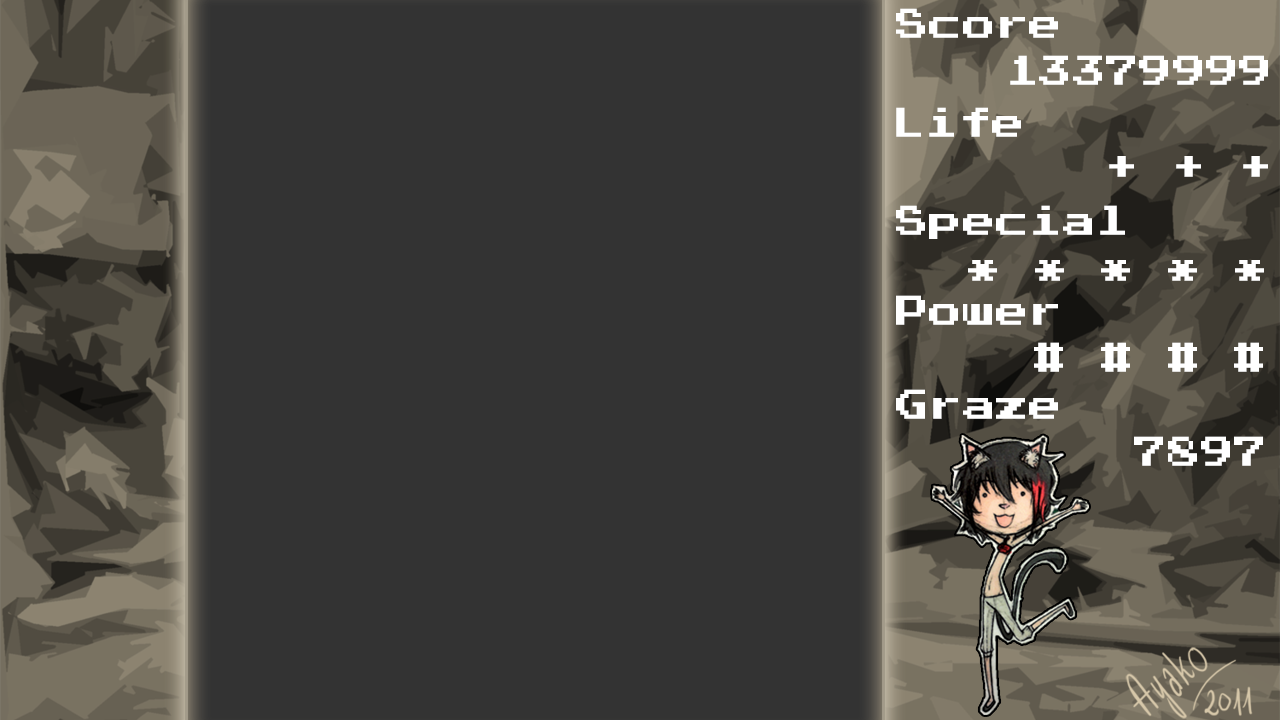
<style>
.page{position:relative;width:1280px;height:720px;background:#333333}
.page>*{position:absolute;margin:0}
.t1{font:33.3px "PressStart2P";color:#ffffff}
</style>
<div class="page">
<p class="t1" style="left:896px;top:8px;width:162px;height:30px">Score</p>
<p class="t1" style="left:1010px;top:55px;width:258px;height:30px">13379999</p>
<p class="t1" style="left:896px;top:107px;width:125px;height:30px">Life</p>
<p class="t1" style="left:1109px;top:156px;width:159px;height:21px">+ + +</p>
<p class="t1" style="left:896px;top:205px;width:229px;height:34px">Special</p>
<p class="t1" style="left:968px;top:260px;width:296px;height:21px">* * * * *</p>
<p class="t1" style="left:896px;top:295px;width:162px;height:30px">Power</p>
<p class="t1" style="left:1034px;top:342px;width:229px;height:30px"># # # #</p>
<p class="t1" style="left:896px;top:389px;width:162px;height:30px">Graze</p>
<p class="t1" style="left:1134px;top:436px;width:129px;height:30px">7897</p>
</div>
